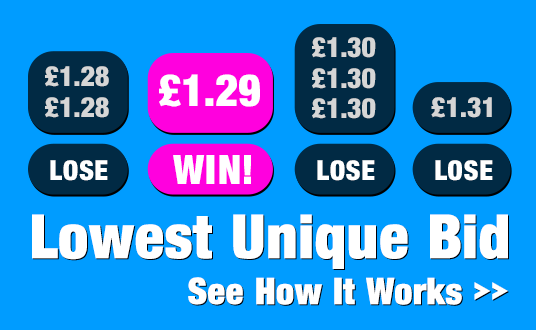
<style>
.page{position:relative;width:536px;height:330px;background:#009cff}
.page>*{position:absolute;margin:0}
.t1{font:27.2px "BasicSansHeavySF-Bold";color:#d6d6d6}
.t2{font:43.5px "BasicSansHeavySF-Bold";color:#ffffff}
.t3{font:27.2px "BasicSansHeavySF-Bold";letter-spacing:0.04em;color:#ffffff;text-transform:uppercase}
.t4{font:39.9px "BasicSansHeavySF-Bold";letter-spacing:0.04em;color:#ffffff;text-transform:uppercase}
.t5{font:60px "BasicSansHeavySF-Bold";letter-spacing:-0.01em;color:#ffffff;font-weight:bold}
.t6{font:36px "BasicSansHeavySF-Bold";letter-spacing:-0.01em;color:#ffffff;font-weight:bold}
</style>
<div class="page">
<p class="t1" style="left:312px;top:37px;width:64px;height:21px">£1.30</p>
<p class="t1" style="left:45px;top:66px;width:64px;height:21px">£1.28</p>
<p class="t2" style="left:159px;top:74px;width:101px;height:33px">£1.29</p>
<p class="t1" style="left:312px;top:68px;width:64px;height:21px">£1.30</p>
<p class="t1" style="left:45px;top:97px;width:64px;height:21px">£1.28</p>
<p class="t1" style="left:312px;top:98px;width:64px;height:21px">£1.30</p>
<p class="t1" style="left:431px;top:97px;width:61px;height:21px">£1.31</p>
<p class="t3" style="left:50px;top:160px;width:58px;height:21px">lose</p>
<p class="t4" style="left:173px;top:155px;width:78px;height:29px">win!</p>
<p class="t3" style="left:317px;top:160px;width:58px;height:21px">lose</p>
<p class="t3" style="left:435px;top:160px;width:58px;height:21px">lose</p>
<p class="t5" style="left:32px;top:214px;width:476px;height:55px">Lowest Unique Bid</p>
<p class="t6" style="left:188px;top:277px;width:320px;height:28px">See How It Works &gt;&gt;</p>
</div>
